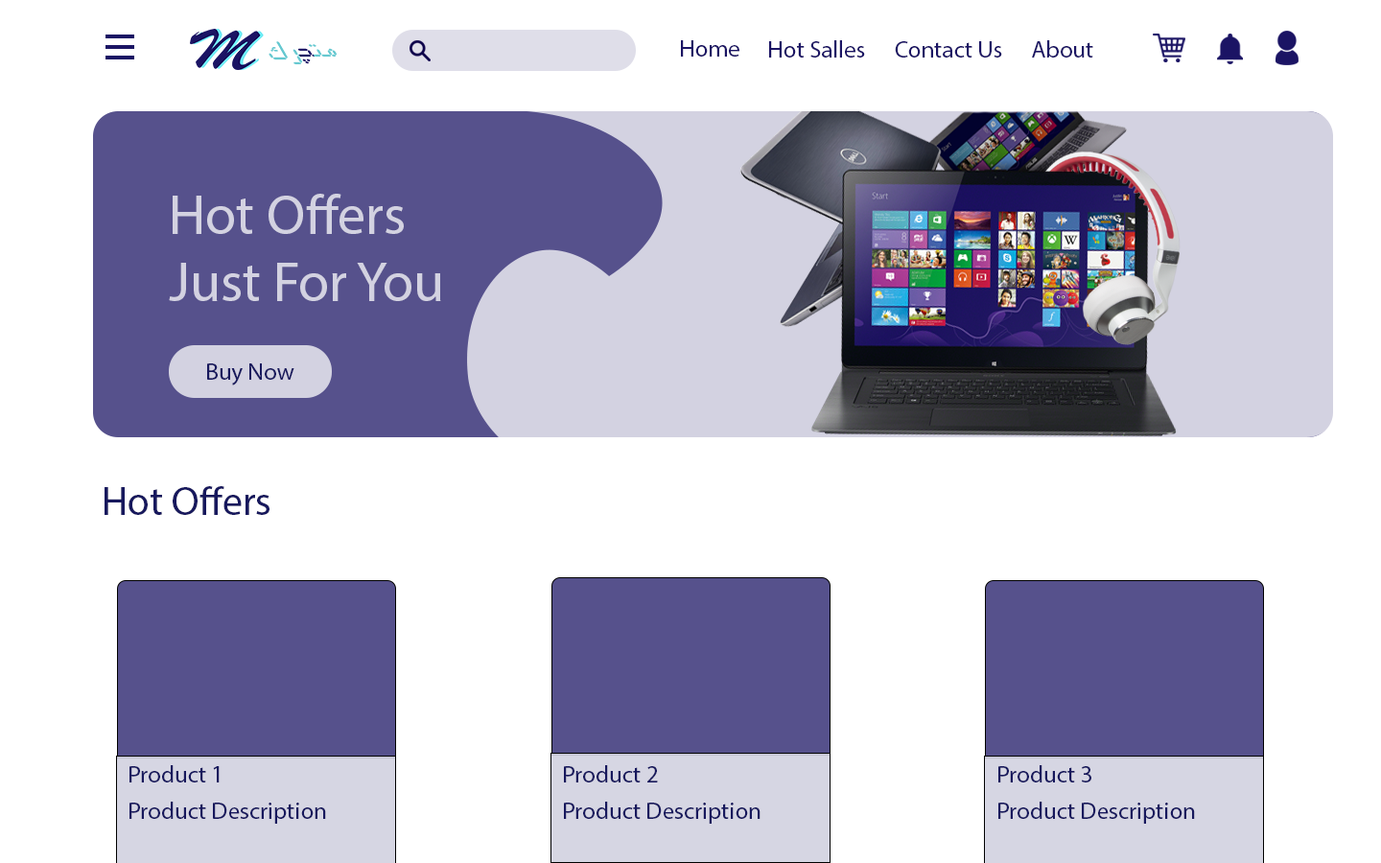
<style>
.page{position:relative;width:1381px;height:863px;background:#ffffff}
.page>*{position:absolute;margin:0}
.t1{font:24px "MyriadPro-Regular";color:#1b1464}
.t2{font:56px "MyriadPro-Regular";color:#d3d2e1}
.t3{font:24px "MyriadPro-Regular";color:#17185d}
.t4{font:40px "MyriadPro-Regular";color:#17185d}
</style>
<div class="page">
<p class="t1" style="left:681px;top:40px;width:59px;height:17px">Home</p>
<p class="t1" style="left:769px;top:40px;width:96px;height:18px">Hot Salles</p>
<p class="t1" style="left:895px;top:41px;width:107px;height:17px">Contact Us</p>
<p class="t1" style="left:1032px;top:40px;width:62px;height:18px">About</p>
<p class="t2" style="left:169px;top:194px;width:272px;height:107px">Hot Offers <br>Just For You</p>
<p class="t3" style="left:207px;top:364px;width:87px;height:22px">Buy Now</p>
<p class="t4" style="left:105px;top:486px;width:165px;height:29px">Hot Offers</p>
<p class="t3" style="left:129px;top:765px;width:91px;height:18px">Product 1</p>
<p class="t3" style="left:564px;top:765px;width:94px;height:18px">Product 2</p>
<p class="t3" style="left:999px;top:765px;width:93px;height:18px">Product 3</p>
<p class="t3" style="left:129px;top:802px;width:197px;height:22px">Product Description</p>
<p class="t3" style="left:564px;top:802px;width:197px;height:22px">Product Description</p>
<p class="t3" style="left:999px;top:802px;width:196px;height:22px">Product Description</p>
</div>
